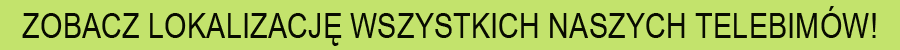
<style>
.page{position:relative;width:900px;height:50px;background:#c3e36c}
.page>*{position:absolute;margin:0}
.t1{font:35.4px "ArialNarrow";color:#080b00}
</style>
<div class="page">
<p class="t1" style="left:22px;top:6px;width:854px;height:40px">ZOBACZ LOKALIZACJĘ WSZYSTKICH NASZYCH TELEBIMÓW!</p>
</div>
